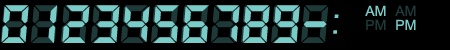
<style>
.page{position:relative;width:450px;height:50px;background:#000000}
.page>*{position:absolute;margin:0}
.t1{font:59px "LetsgoDigital-Regular"}
.t2{font:59px "LetsgoDigital-Regular";color:#7accc8}
.t3{font:14px "ArialMT";color:#7accc8}
.t4{font:14px "ArialMT";color:#1d3a38}
.t5{font:36px "LetsgoDigital-Regular";color:#7accc8}
</style>
<div class="page">
<p class="t1" style="left:0px;top:5px;width:329px;height:38px">88888888888</p>
<p class="t2" style="left:1px;top:5px;width:326px;height:39px">0 i23456789-</p>
<p class="t3" style="left:365px;top:5px;width:21px;height:11px">AM</p>
<p class="t4" style="left:395px;top:5px;width:21px;height:11px">AM</p>
<p class="t5" style="left:333px;top:14px;width:6px;height:20px">:</p>
<p class="t4" style="left:366px;top:19px;width:20px;height:11px">PM</p>
<p class="t3" style="left:396px;top:19px;width:20px;height:11px">PM</p>
</div>
